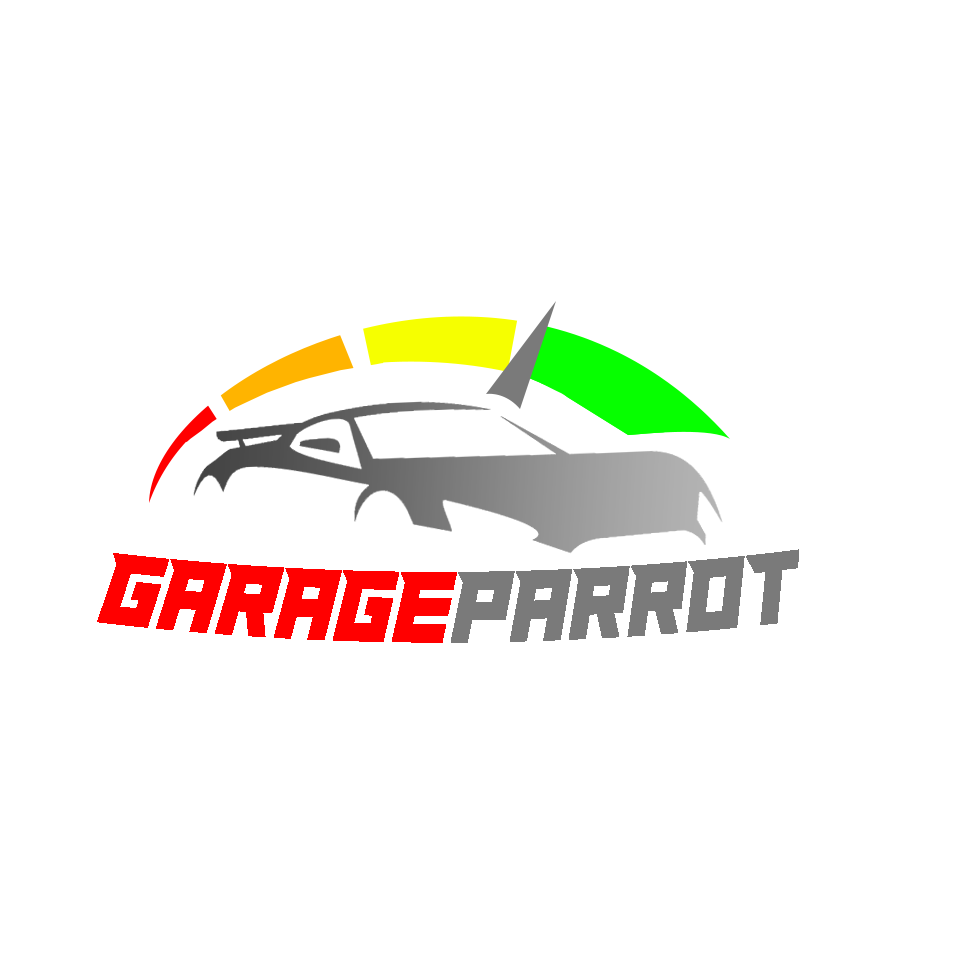
<style>
.page{position:relative;width:980px;height:980px;background:#ffffff}
.page>*{position:absolute;margin:0}
.t1{font:108px "Paladins";color:#ff0000;scale:0.53 1}
.t2{font:108px "Paladins";color:#7a7a7a;scale:0.53 1}
</style>
<div class="page">
<p class="t1" style="left:97px;top:549px;width:702px;height:94px">GARAGE<span class="t2">PARROT</span></p>
</div>
